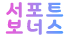
<style>
.page{position:relative;width:69px;height:38px;background:#ffffff}
.page>*{position:absolute;margin:0}
.t1{font:18.7px "Binggrae-Bold";letter-spacing:0.1em;text-transform:uppercase}
</style>
<div class="page">
<p class="t1" style="left:6px;top:2px;width:58px;height:16px">서포트</p>
<p class="t1" style="left:5px;top:19px;width:59px;height:16px">보너스</p>
</div>
